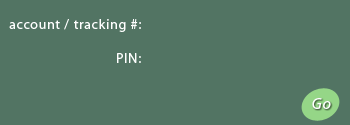
<style>
.page{position:relative;width:350px;height:125px;background:#527463}
.page>*{position:absolute;margin:0}
.t1{font:14px "Myriad-Roman";letter-spacing:0.05em;color:#ffffff}
.t2{font:16px "Myriad-Italic";letter-spacing:0.05em;color:#ffffff}
</style>
<div class="page">
<p class="t1" style="left:9px;top:17px;width:132px;height:16px">account / tracking #:</p>
<p class="t1" style="left:116px;top:51px;width:25px;height:16px">PIN:</p>
<p class="t2" style="left:312px;top:98px;width:19px;height:11px">Go</p>
</div>
